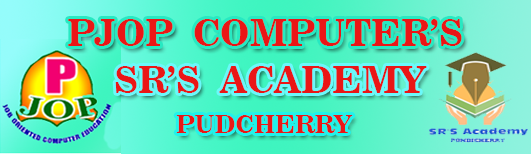
<style>
.page{position:relative;width:531px;height:154px}
.page>*{position:absolute;margin:0}
.t1{font:37.5px "News706BT-BoldC";color:#ea1616}
.t2{font:25px "News706BT-BoldC";color:#ea1616}
</style>
<div class="page">
<p class="t1" style="left:68px;top:19px;width:394px;height:27px">PJOP  COMPUTER’S</p>
<p class="t1" style="left:115px;top:66px;width:312px;height:27px">SR’S  ACADEMY</p>
<p class="t2" style="left:176px;top:115px;width:177px;height:18px">PUDCHERRY</p>
</div>
